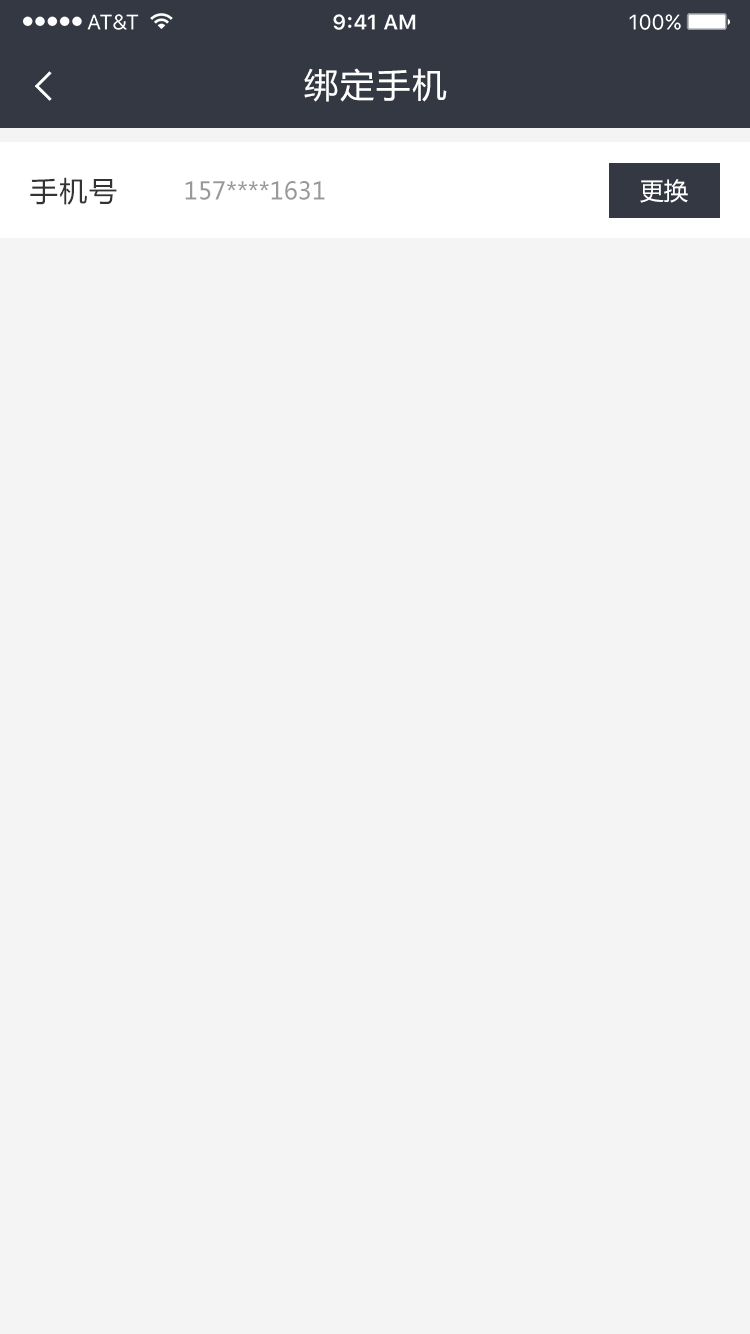
<style>
.page{position:relative;width:750px;height:1334px;background:#f4f4f4}
.page>*{position:absolute;margin:0}
.t1{font:34px "MicrosoftYaHei";letter-spacing:0.06em;color:#ffffff}
.t2{font:28px "MicrosoftYaHei";letter-spacing:0.06em;color:#333333}
.t3{font:24px "MicrosoftYaHei";color:#999999}
.t4{font:24px "MicrosoftYaHei";color:#ffffff}
</style>
<div class="page">
<p class="t1" style="left:304px;top:68px;width:143px;height:34px">绑定手机</p>
<p class="t2" style="left:30px;top:177px;width:87px;height:28px">手机号</p>
<p class="t3" style="left:185px;top:181px;width:140px;height:19px">157****1631</p>
<p class="t4" style="left:640px;top:179px;width:48px;height:24px">更换</p>
</div>
